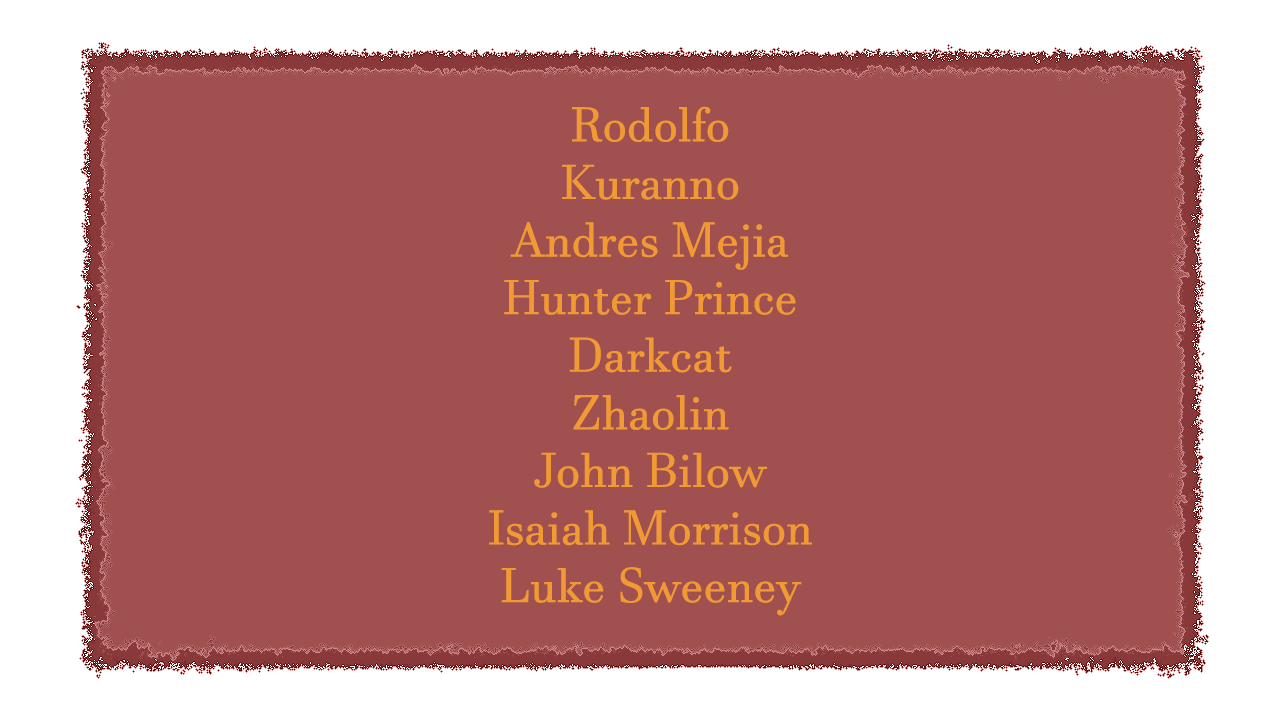
<style>
.page{position:relative;width:1280px;height:720px;background:#a15050}
.page>*{position:absolute;margin:0}
.t1{font:48px "JavaneseText";color:#f19a34}
</style>
<div class="page">
<p class="t1" style="left:489px;top:106px;width:323px;height:510px;text-align:center">Rodolfo<br>Kuranno<br>Andres Mejia<br>Hunter Prince<br>Darkcat<br>Zhaolin<br>John Bilow<br>Isaiah Morrison<br>Luke Sweeney</p>
</div>
